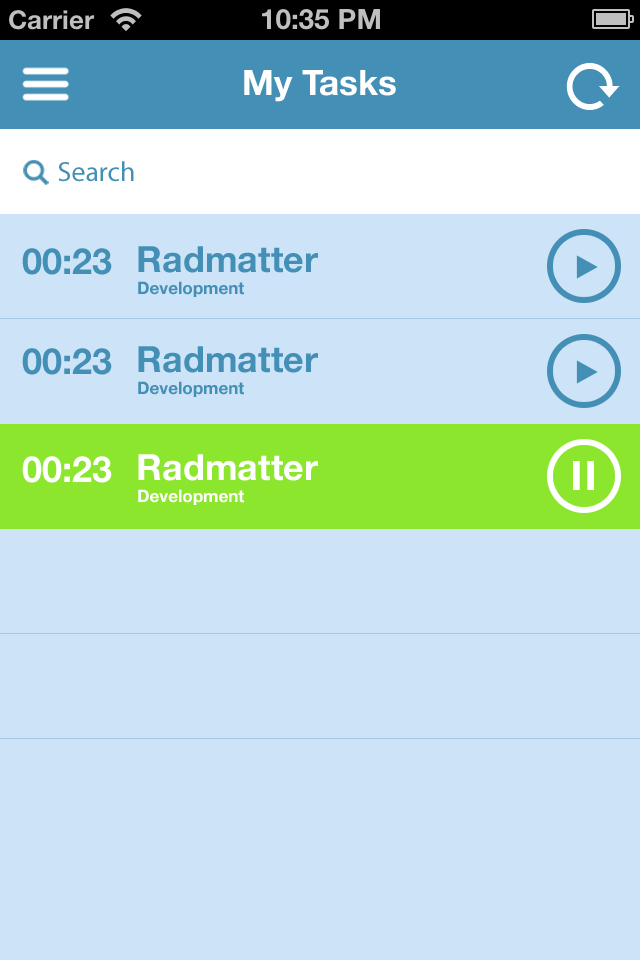
<style>
.page{position:relative;width:640px;height:960px;background:#cde3f7}
.page>*{position:absolute;margin:0}
.t1{font:55.7px "mrticktock";color:#ffffff}
.t2{font:64.9px "ticktock";color:#ffffff}
.t3{font:35px "HelveticaNeue-Bold";color:#ffffff}
.t4{font:27.9px "ticktock";color:#448fb5}
.t5{font:27.9px "MyriadPro-Regular";color:#448fb5}
.t6{font:36px "HelveticaNeue-Bold";color:#448fb5}
.t7{font:17px "HelveticaNeue-Bold";color:#448fb5}
.t8{font:36px "HelveticaNeue-Bold";color:#ffffff}
.t9{font:17px "HelveticaNeue-Bold";color:#ffffff}
</style>
<div class="page">
<p class="t1" style="left:566px;top:63px;width:54px;height:47px">d</p>
<p class="t2" style="left:22px;top:67px;width:47px;height:34px">b</p>
<p class="t3" style="left:244px;top:70px;width:152px;height:32px">My Tasks</p>
<p class="t4" style="left:23px;top:160px;width:26px;height:25px">a</p>
<p class="t5" style="left:58px;top:161px;width:76px;height:21px">Search</p>
<p class="t6" style="left:138px;top:246px;width:180px;height:27px">Radmatter</p>
<p class="t6" style="left:22px;top:248px;width:90px;height:27px">00:23</p>
<p class="t7" style="left:138px;top:281px;width:106px;height:16px">Development</p>
<p class="t6" style="left:22px;top:348px;width:90px;height:27px">00:23</p>
<p class="t6" style="left:138px;top:346px;width:180px;height:27px">Radmatter</p>
<p class="t7" style="left:138px;top:381px;width:106px;height:16px">Development</p>
<p class="t8" style="left:22px;top:456px;width:90px;height:27px">00:23</p>
<p class="t8" style="left:138px;top:454px;width:180px;height:27px">Radmatter</p>
<p class="t9" style="left:138px;top:489px;width:106px;height:16px">Development</p>
</div>
